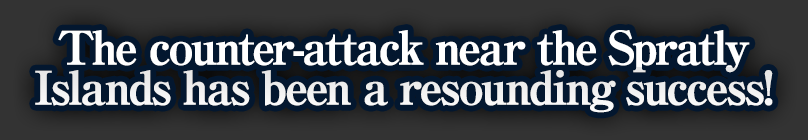
<style>
.page{position:relative;width:808px;height:140px;background:#03172f}
.page>*{position:absolute;margin:0}
.t1{font:46px/40px "RyuminPro-ExBold";letter-spacing:-0.08em;color:#ffffff;font-weight:bold}
</style>
<div class="page">
<p class="t1" style="left:35px;top:30px;width:738px;height:83px;text-align:center">The counter-attack near the Spratly<br>Islands has been a resounding success!</p>
</div>
